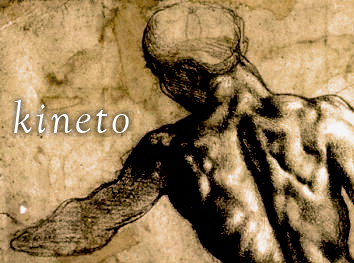
<style>
.page{position:relative;width:354px;height:263px}
.page>*{position:absolute;margin:0}
.t1{font:48px "GoudyOldStyleT-Italic";letter-spacing:0.06em;color:#ffffff}
</style>
<div class="page">
<p class="t1" style="left:14px;top:100px;width:115px;height:33px">kineto</p>
</div>
